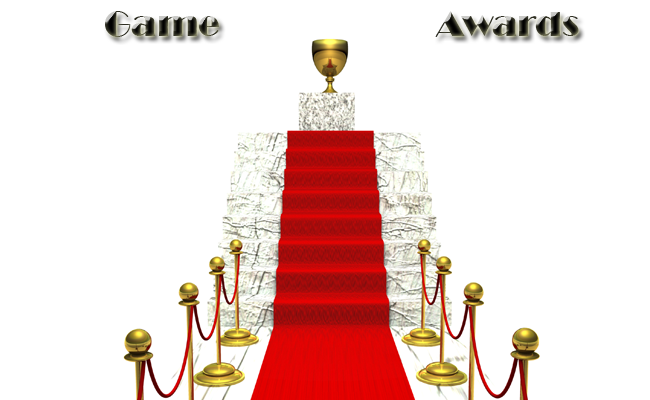
<style>
.page{position:relative;width:650px;height:400px;background:#ffffff}
.page>*{position:absolute;margin:0}
.t1{font:36px "Broadway"}
</style>
<div class="page">
<p class="t1" style="left:105px;top:11px;width:474px;height:26px">Game                        Awards</p>
</div>
